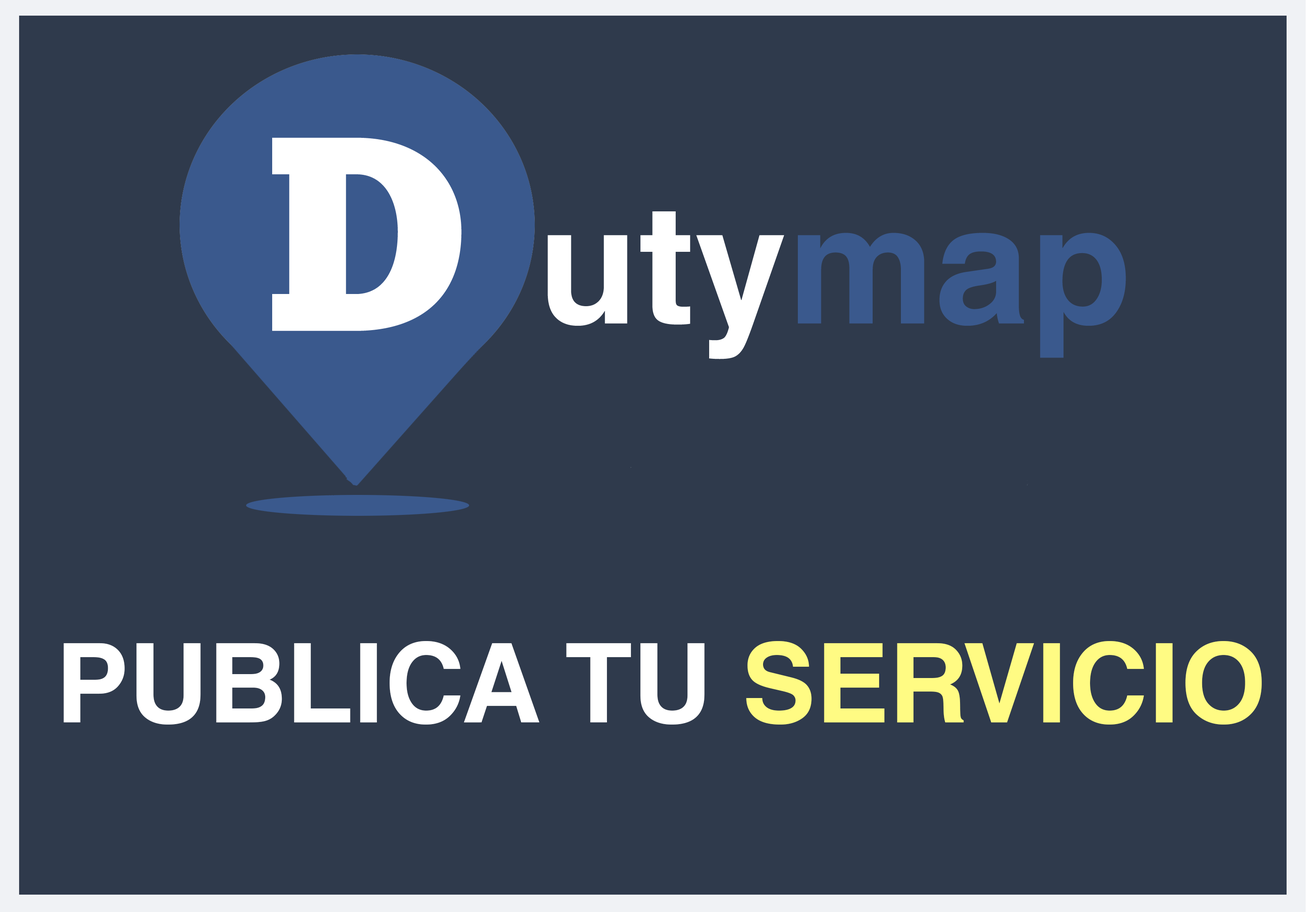
<style>
.page{position:relative;width:1307px;height:912px;background:#2f3a4c}
.page>*{position:absolute;margin:0}
.t1{font:110.5px "HelveticaWorld-Bold";color:#ffffff}
.t2{font:110.5px "HelveticaWorld-Bold";color:#fffb83}
</style>
<div class="page">
<p class="t1" style="left:64px;top:641px;width:1198px;height:84px">PUBLICA TU <span class="t2">SERVICIO</span></p>
</div>
